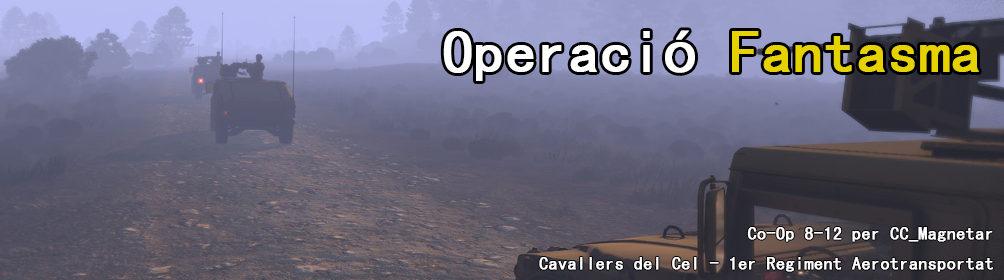
<style>
.page{position:relative;width:1004px;height:280px}
.page>*{position:absolute;margin:0}
.t1{font:60px "MS-Gothic";color:#e5d200;font-weight:bold}
.t2{font:60px "MS-Gothic";color:#ffffff;font-weight:bold}
.t3{font:60px "MyriadPro-Regular";color:#ffffff;font-weight:bold}
.t4{font:18px/30px "MS-Gothic";color:#ffffff;font-weight:bold}
</style>
<div class="page">
<p class="t1" style="left:443px;top:30px;width:536px;height:51px"><span class="t2">Operaci</span><span class="t3">ó </span>Fantasma</p>
<p class="t4" style="left:539px;top:227px;width:454px;height:45px;text-align:right">Co-Op 8-12 per CC_Magnetar<br>Cavallers del Cel - 1er Regiment Aerotransportat</p>
</div>
